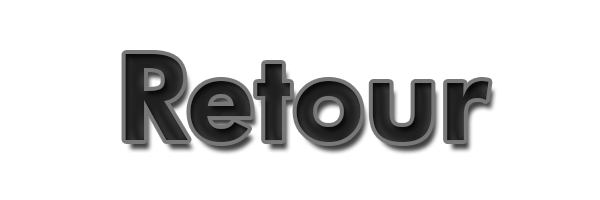
<style>
.page{position:relative;width:600px;height:200px;background:#ffffff}
.page>*{position:absolute;margin:0}
.t1{font:120px "FuturaBT-Heavy";color:#212121}
</style>
<div class="page">
<p class="t1" style="left:125px;top:54px;width:364px;height:88px">Retour</p>
</div>
